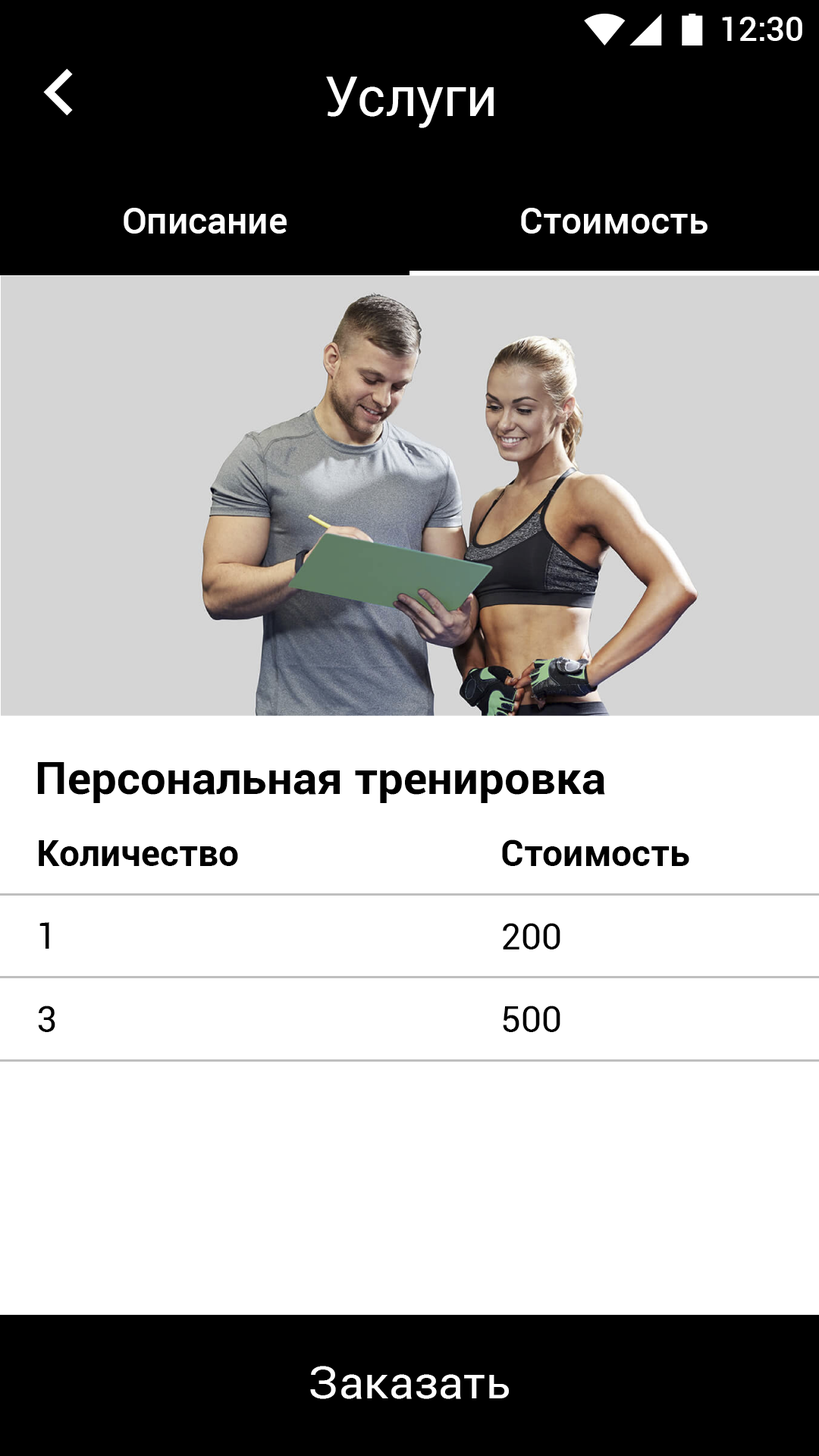
<style>
.page{position:relative;width:819px;height:1456px;background:#ffffff}
.page>*{position:absolute;margin:0}
.t1{font:33.4px "Roboto-Medium";color:#ffffff}
.t2{font:54.6px "Roboto-Regular";color:#ffffff}
.t3{font:36.4px "Roboto-Medium";color:#ffffff}
.t4{font:45.5px "Roboto-Bold";color:#000000}
.t5{font:36.4px "Roboto-Bold";color:#000000}
.t6{font:36.4px "Roboto-Regular";color:#000000}
.t7{font:45.5px "Roboto-Regular";color:#ffffff}
</style>
<div class="page">
<p class="t1" style="left:722px;top:17px;width:80px;height:24px">12:30</p>
<p class="t2" style="left:326px;top:77px;width:168px;height:51px">Услуги</p>
<p class="t3" style="left:124px;top:208px;width:163px;height:26px">Описание</p>
<p class="t3" style="left:521px;top:208px;width:187px;height:26px">Стоимость</p>
<p class="t4" style="left:37px;top:762px;width:568px;height:41px">Персональная тренировка</p>
<p class="t5" style="left:39px;top:840px;width:199px;height:26px">Количество</p>
<p class="t5" style="left:502px;top:839px;width:187px;height:27px">Стоимость</p>
<p class="t6" style="left:39px;top:922px;width:10px;height:27px">1</p>
<p class="t6" style="left:503px;top:923px;width:57px;height:26px">200</p>
<p class="t6" style="left:38px;top:1006px;width:17px;height:26px">3</p>
<p class="t6" style="left:503px;top:1006px;width:57px;height:26px">500</p>
<p class="t7" style="left:310px;top:1366px;width:199px;height:33px">Заказать</p>
</div>
